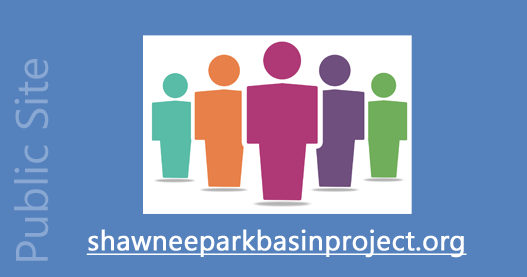
<style>
.page{position:relative;width:527px;height:277px;background:#5581bc}
.page>*{position:absolute;margin:0}
.t1{font:45.6px "Gadugi";color:#88a7d2}
.t2{font:27.8px "Gadugi";color:#ffffff;font-weight:bold;text-decoration:underline}
</style>
<div class="page">
<p class="t1" style="left:14px;top:59px;width:35px;height:202px;rotate:-90deg">Public Site</p>
<p class="t2" style="left:86px;top:229px;width:381px;height:29px">shawneeparkbasinproject.org</p>
</div>
